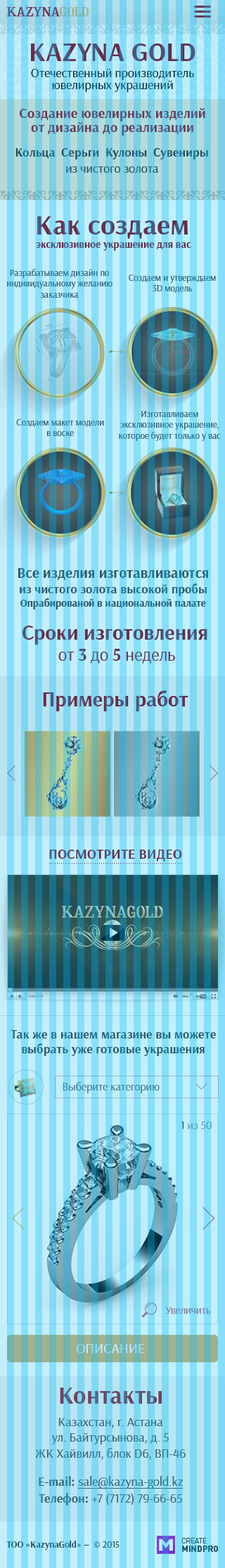
<style>
.page{position:relative;width:225px;height:1568px}
.page>*{position:absolute;margin:0}
.t1{font:12.6px/15.4px "Arsenal-Regular"}
.t2{font:26.7px "Arsenal-Bold";text-transform:uppercase}
.t3{font:12.6px/11.9px "Arsenal-Regular"}
.t4{font:14px/13.3px "Arsenal-Bold"}
.t5{font:12.6px "Arsenal-Bold"}
.t6{font:9.1px "Arsenal-Bold"}
.t7{font:12.6px "Arsenal-Regular"}
.t8{font:10.5px "Arsenal-Bold"}
.t9{font:28.1px "Arsenal-Bold"}
.t10{font:9.1px "Arsenal-Regular"}
.t11{font:14.7px "Arsenal-Bold"}
.t12{font:12.6px/14.1px "Arsenal-Bold"}
.t13{font:21.1px "Arsenal-Bold"}
.t14{font:17.6px "Arsenal-Regular"}
.t15{font:17.6px "Arsenal-Bold"}
.t16{font:14px "Arsenal-Bold";text-transform:uppercase}
.t17{font:11.2px "Arsenal-Regular"}
.t18{font:10.5px "Arsenal-Regular"}
.t19{font:14px "Arsenal-Regular";text-transform:uppercase}
.t20{font:24.6px "Arsenal-Bold"}
.t21{font:12.6px/28.1px "Arsenal-Bold"}
.t22{font:12.6px/28.1px "Arsenal-Regular";text-decoration:underline}
.t23{font:12.6px/16.2px "Arsenal-Bold"}
.t24{font:12.6px/16.2px "Arsenal-Regular"}
</style>
<div class="page">
<p class="t1" style="left:31px;top:44px;width:164px;height:48px;text-align:center"><span class="t2">Kazyna Gold<br></span>Отечественный производитель<br><span class="t3">ювелирных украшений</span></p>
<p class="t4" style="left:20px;top:108px;width:185px;height:28px;text-align:center">Создание ювелирных изделий<br>от дизайна до реализации</p>
<p class="t5" style="left:15px;top:148px;width:193px;height:25px;text-align:center"><span class="t6"><br></span>Кольца  Серьги  Кулоны  Сувениры<br><span class="t7">из чистого золота</span></p>
<p class="t8" style="left:36px;top:216px;width:155px;height:35px;text-align:center"><span class="t9">Как создаем<br></span> эксклюзивное украшение для вас</p>
<p class="t10" style="left:7px;top:269px;width:105px;height:29px;text-align:center">Разрабатываем дизайн по индивидуальному желанию заказчика</p>
<p class="t10" style="left:129px;top:275px;width:87px;height:18px;text-align:center">Создаем и утверждаем 3D модель</p>
<p class="t10" style="left:119px;top:411px;width:101px;height:30px;text-align:center">Изготавливаем эксклюзивное украшение, которое будет только у вас</p>
<p class="t10" style="left:16px;top:419px;width:88px;height:17px;text-align:center">Создаем макет модели в воске</p>
<p class="t8" style="left:18px;top:568px;width:190px;height:42px;text-align:center"><span class="t11">Все изделия изготавливаются<br></span><span class="t12">из чистого золота высокой пробы<br></span>Опрабированой в национальной палате</p>
<p class="t13" style="left:22px;top:626px;width:185px;height:38px;text-align:center">Сроки изготовления<br> <span class="t14">от </span><span class="t15">3</span><span class="t14"> до </span><span class="t15">5</span><span class="t14"> недель</span></p>
<p class="t13" style="left:43px;top:690px;width:145px;height:21px">Примеры работ</p>
<p class="t16" style="left:49px;top:850px;width:133px;height:12px">Посмотрите видео</p>
<p class="t5" style="left:11px;top:1030px;width:205px;height:26px;text-align:center">Так же в нашем магазине вы можете выбрать уже готовые украшения</p>
<p class="t17" style="left:62px;top:1082px;width:97px;height:11px">Выберите категорию</p>
<p class="t17" style="left:180px;top:1121px;width:31px;height:8px">1 из 50</p>
<p class="t18" style="left:165px;top:1307px;width:46px;height:8px">Увеличить</p>
<p class="t19" style="left:77px;top:1344px;width:68px;height:9px">Описание</p>
<p class="t20" style="left:60px;top:1388px;width:102px;height:16px">Контакты</p>
<p class="t7" style="left:35px;top:1418px;width:150px;height:88px;text-align:center">Казахстан, г. Астана <br>ул. Байтурсынова, д. 5 <br>ЖК Хайвилл, блок D6, ВП-46<br><span class="t21">E-mail: </span><span class="t22">sale@kazyna-gold.kz<br></span><span class="t23">Телефон: </span><span class="t24">+7 (7172) 79-66-65</span></p>
<p class="t6" style="left:6px;top:1541px;width:113px;height:9px">ТОО «KazynaGold»<span class="t10"> —  © 2015</span></p>
</div>
